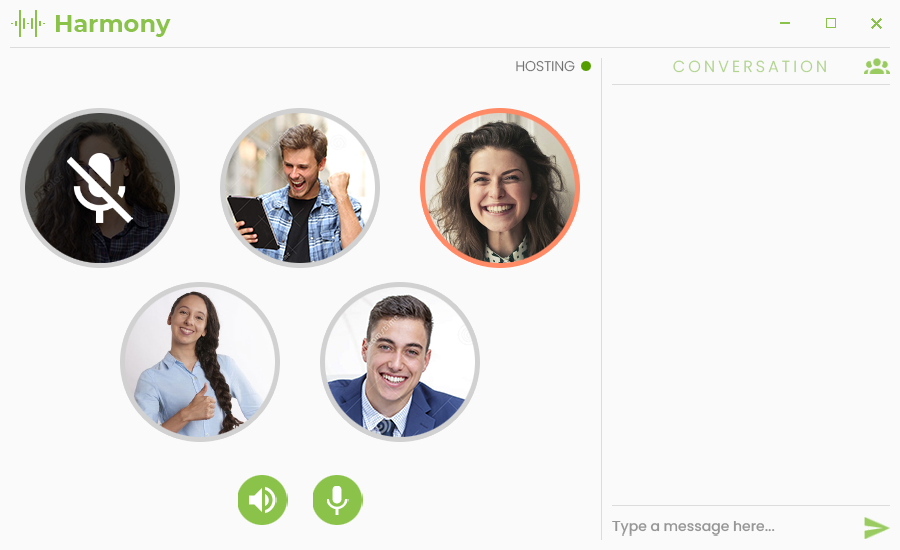
<style>
.page{position:relative;width:900px;height:550px;background:#fafafa}
.page>*{position:absolute;margin:0}
.t1{font:24px "Montserrat-Bold";color:#8bc34a}
.t2{font:14px "Poppins-Light";color:#717171}
.t3{font:16px "Poppins-Light";letter-spacing:0.2em;color:#b0d48b}
</style>
<div class="page">
<p class="t1" style="left:56px;top:15px;width:115px;height:22px">Harmony</p>
<p class="t2" style="left:516px;top:60px;width:59px;height:12px">HOSTING</p>
<p class="t3" style="left:673px;top:60px;width:153px;height:13px">CONVERSATION</p>
</div>
